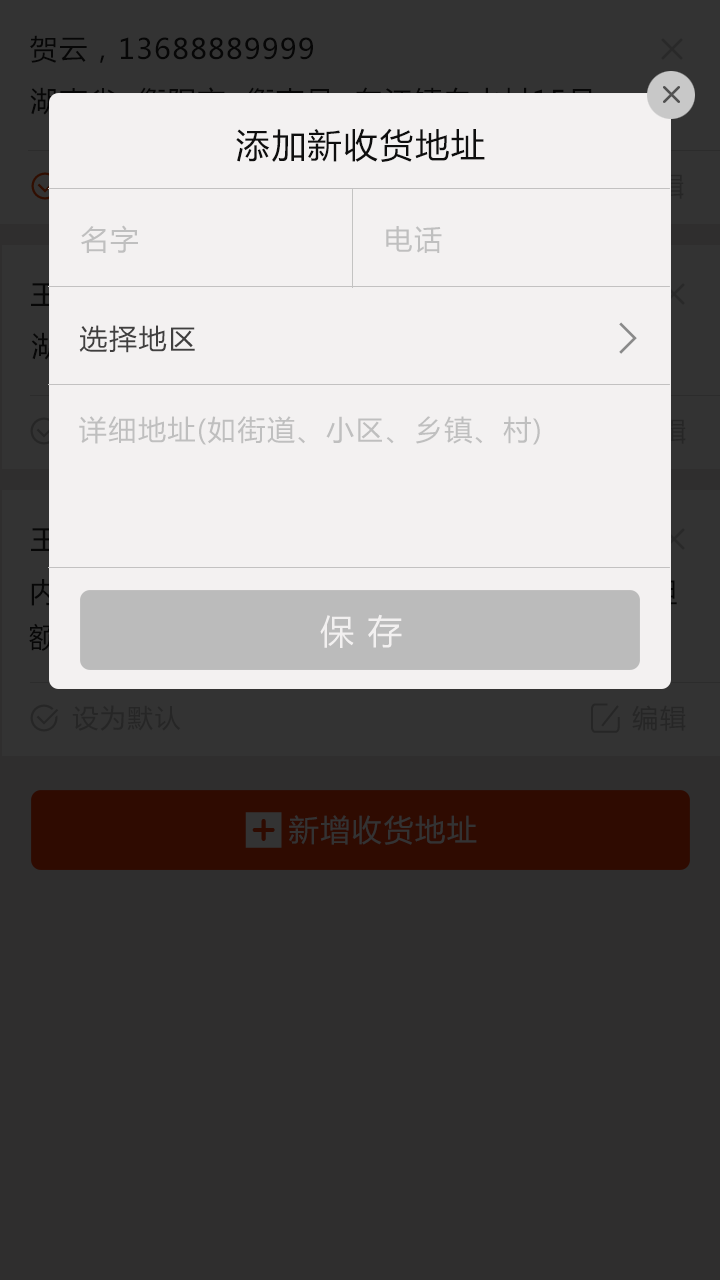
<style>
.page{position:relative;width:720px;height:1280px;background:#2f2e2e}
.page>*{position:absolute;margin:0}
.t1{font:34px "MicrosoftYaHei";letter-spacing:0.055em;color:#0e0e0e;text-transform:uppercase}
.t2{font:28px "MicrosoftYaHei";letter-spacing:0.055em;color:#bfbfbf;text-transform:uppercase}
.t3{font:28px "MicrosoftYaHei";letter-spacing:0.055em;color:#403f3f;text-transform:uppercase}
.t4{font:34px "MicrosoftYaHei";letter-spacing:0.055em;color:#f2f0f0;text-transform:uppercase}
</style>
<div class="page">
<p class="t1" style="left:236px;top:128px;width:249px;height:34px">添加新收货地址</p>
<p class="t2" style="left:81px;top:225px;width:57px;height:28px">名字</p>
<p class="t2" style="left:386px;top:226px;width:56px;height:27px">电话</p>
<p class="t3" style="left:79px;top:325px;width:116px;height:28px">选择地区</p>
<p class="t2" style="left:79px;top:416px;width:461px;height:29px">详细地址(如街道、小区、乡镇、村)</p>
<p class="t4" style="left:320px;top:614px;width:82px;height:34px">保 存</p>
</div>
